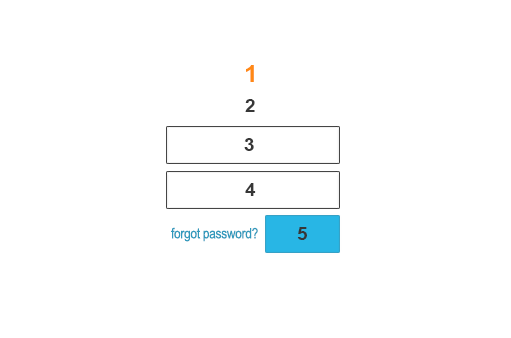
<style>
.page{position:relative;width:511px;height:338px;background:#ffffff}
.page>*{position:absolute;margin:0}
.t1{font:24px "Arial-BoldMT";letter-spacing:-0.025em;color:#ff8914;scale:1.06 1}
.t2{font:17.8px "Arial-BoldMT";letter-spacing:-0.025em;color:#373737;scale:1.06 1}
.t3{font:14.4px "ArialMT";letter-spacing:-0.025em;color:#3099bc;scale:0.83 1}
</style>
<div class="page">
<p class="t1" style="left:246px;top:65px;width:8px;height:17px">1</p>
<p class="t2" style="left:245px;top:99px;width:10px;height:13px">2</p>
<p class="t2" style="left:244px;top:138px;width:10px;height:13px">3</p>
<p class="t2" style="left:245px;top:183px;width:11px;height:13px">4</p>
<p class="t3" style="left:171px;top:227px;width:87px;height:15px">forgot password?</p>
<p class="t2" style="left:297px;top:227px;width:10px;height:13px">5</p>
</div>
